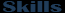
<style>
.page{position:relative;width:65px;height:13px;background:#000000}
.page>*{position:absolute;margin:0}
.t1{font:16px "BritannicBold";color:#253947;scale:1.56 1}
.t2{font:16px "BritannicBold";color:#203c59;scale:1.56 1}
</style>
<div class="page">
<p class="t1" style="left:3px;top:1px;width:59px;height:11px">Skills</p>
<p class="t2" style="left:3px;top:1px;width:59px;height:11px">Skills</p>
</div>
